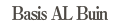
<style>
.page{position:relative;width:118px;height:27px;background:#ffffff}
.page>*{position:absolute;margin:0}
.t1{font:18px "RyuminPro-ExBold";letter-spacing:-0.08em;color:#4c4843;scale:0.9 1}
</style>
<div class="page">
<p class="t1" style="left:12px;top:6px;width:96px;height:15px">Basis AL Buin</p>
</div>
